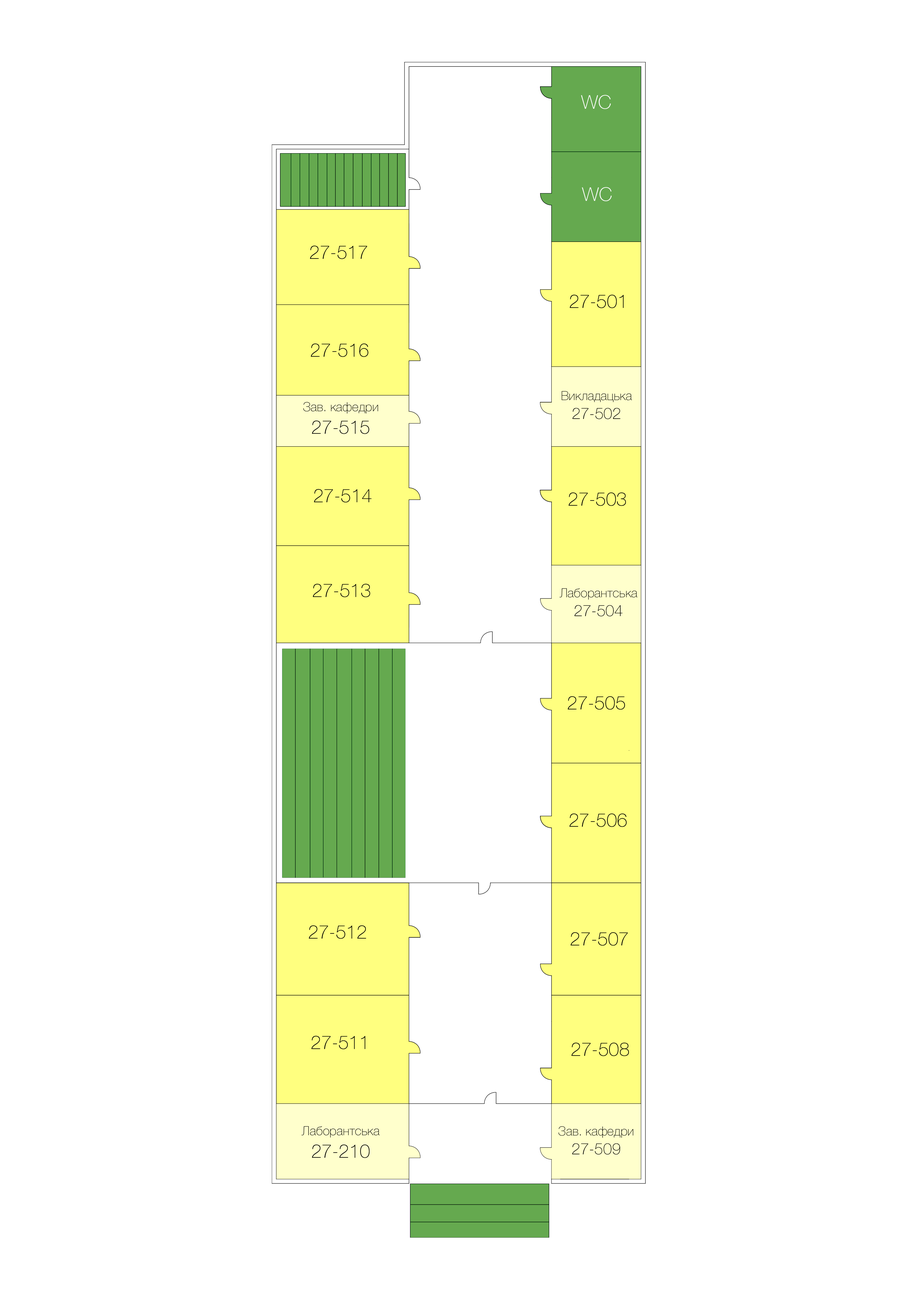
<style>
.page{position:relative;width:918px;height:1299px;background:#ffffff}
.page>*{position:absolute;margin:0}
.t1{font:18.8px "HelveticaNeue-Thin";color:#ffffff}
.t2{font:18.8px "HelveticaNeue-Thin";color:#000000}
.t3{font:12.6px "HelveticaNeue-Thin";color:#000000}
.t4{font:15.7px "HelveticaNeue-Thin";color:#000000}
</style>
<div class="page">
<p class="t1" style="left:581px;top:95px;width:30px;height:14px">WC</p>
<p class="t1" style="left:582px;top:187px;width:30px;height:14px">WC</p>
<p class="t2" style="left:310px;top:245px;width:57px;height:14px">27-517</p>
<p class="t2" style="left:570px;top:295px;width:54px;height:13px">27-501</p>
<p class="t2" style="left:311px;top:343px;width:57px;height:14px">27-516</p>
<p class="t3" style="left:303px;top:402px;width:75px;height:32px;text-align:center">Зав. кафедри<br><span class="t2">27-515</span></p>
<p class="t3" style="left:561px;top:391px;width:71px;height:28px;text-align:center">Викладацька<br><span class="t4">27-502</span></p>
<p class="t2" style="left:314px;top:489px;width:58px;height:14px">27-514</p>
<p class="t2" style="left:569px;top:492px;width:57px;height:14px">27-503</p>
<p class="t2" style="left:313px;top:584px;width:57px;height:13px">27-513</p>
<p class="t3" style="left:559px;top:588px;width:78px;height:28px;text-align:center">Лаборантська<br><span class="t4">27-504</span></p>
<p class="t2" style="left:568px;top:696px;width:57px;height:14px">27-505</p>
<p class="t2" style="left:569px;top:813px;width:58px;height:14px">27-506</p>
<p class="t2" style="left:309px;top:925px;width:57px;height:14px">27-512</p>
<p class="t2" style="left:571px;top:932px;width:57px;height:14px">27-507</p>
<p class="t2" style="left:311px;top:1036px;width:54px;height:13px">27-511</p>
<p class="t2" style="left:571px;top:1043px;width:58px;height:13px">27-508</p>
<p class="t3" style="left:301px;top:1126px;width:79px;height:32px;text-align:center">Лаборантська<br><span class="t2">27-210</span></p>
<p class="t3" style="left:558px;top:1126px;width:75px;height:29px;text-align:center">Зав. кафедри<br><span class="t4">27-509</span></p>
</div>
